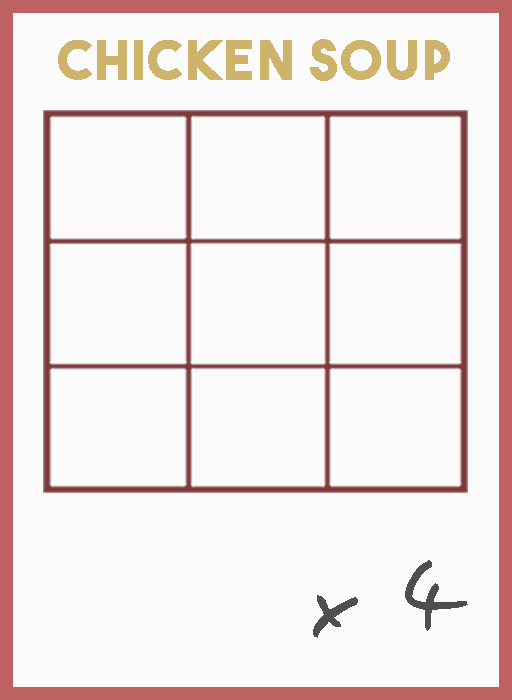
<style>
.page{position:relative;width:512px;height:700px;background:#fbfbfb}
.page>*{position:absolute;margin:0}
.t1{font:54.5px "TheBoldFont";letter-spacing:0.05em;color:#ceb36a}
.t2{font:106.1px "EasySpeech";letter-spacing:0.05em;color:#4f4f4f}
</style>
<div class="page">
<p class="t1" style="left:58px;top:39px;width:392px;height:42px">chicken soup</p>
<p class="t2" style="left:313px;top:560px;width:155px;height:78px">x 4</p>
</div>
